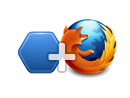
<style>
.page{position:relative;width:130px;height:98px;background:#ffffff}
.page>*{position:absolute;margin:0}
.t1{font:60px "Calibri-Bold"}
</style>
<div class="page">
<p class="t1" style="left:48px;top:43px;width:28px;height:28px">+</p>
</div>
